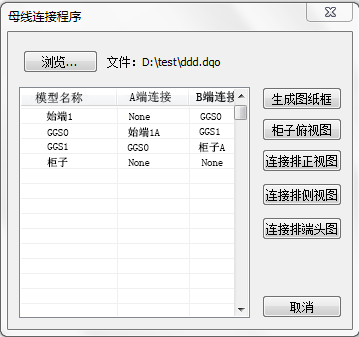
<style>
.page{position:relative;width:359px;height:337px;background:#ffffff}
.page>*{position:absolute;margin:0}
.t1{font:12px "NSimSun"}
.t2{font:12px "NSimSun";color:#030303}
.t3{font:10.7px "NSimSun";color:#030303}
</style>
<div class="page">
<p class="t1" style="left:35px;top:92px;width:48px;height:12px">模型名称</p>
<p class="t2" style="left:129px;top:91px;width:42px;height:12px">A端连接</p>
<p class="t3" style="left:46px;top:111px;width:26px;height:11px">始端1</p>
<p class="t3" style="left:129px;top:113px;width:21px;height:7px">None</p>
<p class="t3" style="left:200px;top:113px;width:22px;height:7px">GGS0</p>
<p class="t3" style="left:47px;top:129px;width:22px;height:7px">GGS0</p>
<p class="t3" style="left:128px;top:127px;width:32px;height:11px">始端1A</p>
<p class="t3" style="left:199px;top:128px;width:21px;height:7px">GGS1</p>
<p class="t3" style="left:47px;top:143px;width:21px;height:7px">GGS1</p>
<p class="t3" style="left:127px;top:144px;width:22px;height:7px">GGS0</p>
<p class="t3" style="left:198px;top:142px;width:28px;height:11px">柜子A</p>
<p class="t3" style="left:47px;top:157px;width:21px;height:11px">柜子</p>
<p class="t3" style="left:128px;top:159px;width:22px;height:7px">None</p>
<p class="t3" style="left:201px;top:159px;width:22px;height:7px">None</p>
</div>
